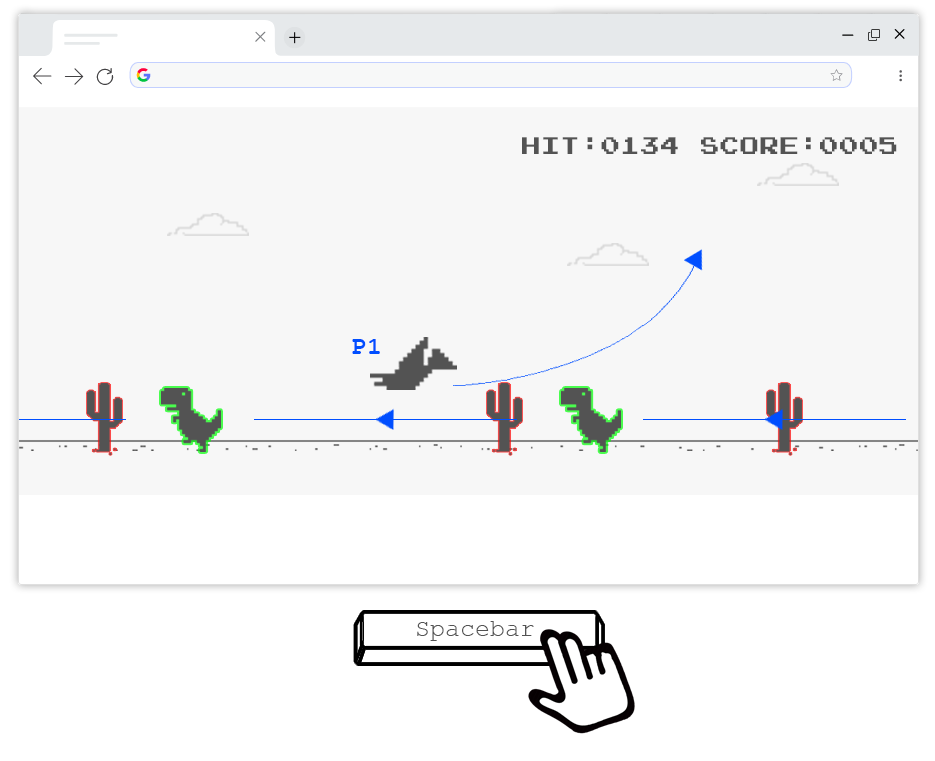
<style>
.page{position:relative;width:935px;height:761px;background:#f7f7f7}
.page>*{position:absolute;margin:0}
.t1{font:24px "JoystixMonospace-Regular";color:#535353}
.t2{font:25px "FreeMonoBold";color:#004eff}
.t3{font:25px "FreeMono";color:#535353}
</style>
<div class="page">
<p class="t1" style="left:522px;top:137px;width:375px;height:17px">HIT:0134 SCORE:0005</p>
<p class="t2" style="left:352px;top:339px;width:28px;height:15px">P1</p>
<p class="t3" style="left:417px;top:621px;width:117px;height:20px">Spacebar</p>
</div>
